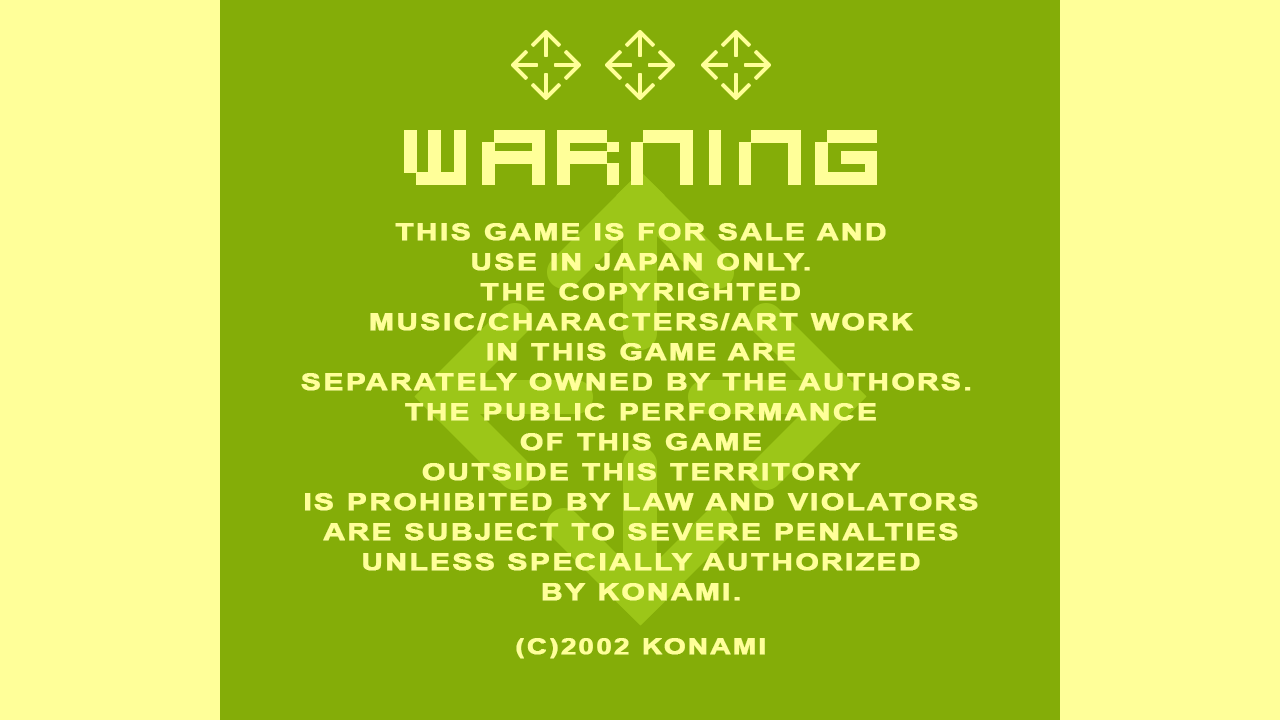
<style>
.page{position:relative;width:1280px;height:720px;background:#84ad08}
.page>*{position:absolute;margin:0}
.t1{font:24px/30px "Arial-BoldMT";letter-spacing:0.05em;color:#ffff99;font-weight:bold;scale:1.25 1}
.t2{font:22.4px "Arial-BoldMT";letter-spacing:0.05em;color:#ffff99;font-weight:bold;scale:1.25 1}
</style>
<div class="page">
<p class="t1" style="left:301px;top:223px;width:677px;height:378px;text-align:center">THIS GAME IS FOR SALE AND<br>USE IN JAPAN ONLY.<br>THE COPYRIGHTED<br>MUSIC/CHARACTERS/ART WORK<br>IN THIS GAME ARE<br>SEPARATELY OWNED BY THE AUTHORS. <br>THE PUBLIC PERFORMANCE<br>OF THIS GAME<br>OUTSIDE THIS TERRITORY<br>IS PROHIBITED BY LAW AND VIOLATORS<br>ARE SUBJECT TO SEVERE PENALTIES<br>UNLESS SPECIALLY AUTHORIZED<br>BY KONAMI.</p>
<p class="t2" style="left:516px;top:638px;width:249px;height:21px">(C)2002 KONAMI</p>
</div>
